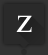
<style>
.page{position:relative;width:48px;height:55px;background:#2a2a2a}
.page>*{position:absolute;margin:0}
.t1{font:36px "TimesNewRomanPSMT";letter-spacing:0.14em;color:#ffffff}
</style>
<div class="page">
<p class="t1" style="left:16px;top:15px;width:16px;height:17px">z</p>
</div>
